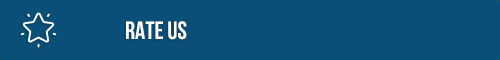
<style>
.page{position:relative;width:500px;height:60px;background:#094f77}
.page>*{position:absolute;margin:0}
.t1{font:25px "UTM-Bebas";color:#ffffff}
</style>
<div class="page">
<p class="t1" style="left:126px;top:21px;width:61px;height:19px">rate us</p>
</div>
